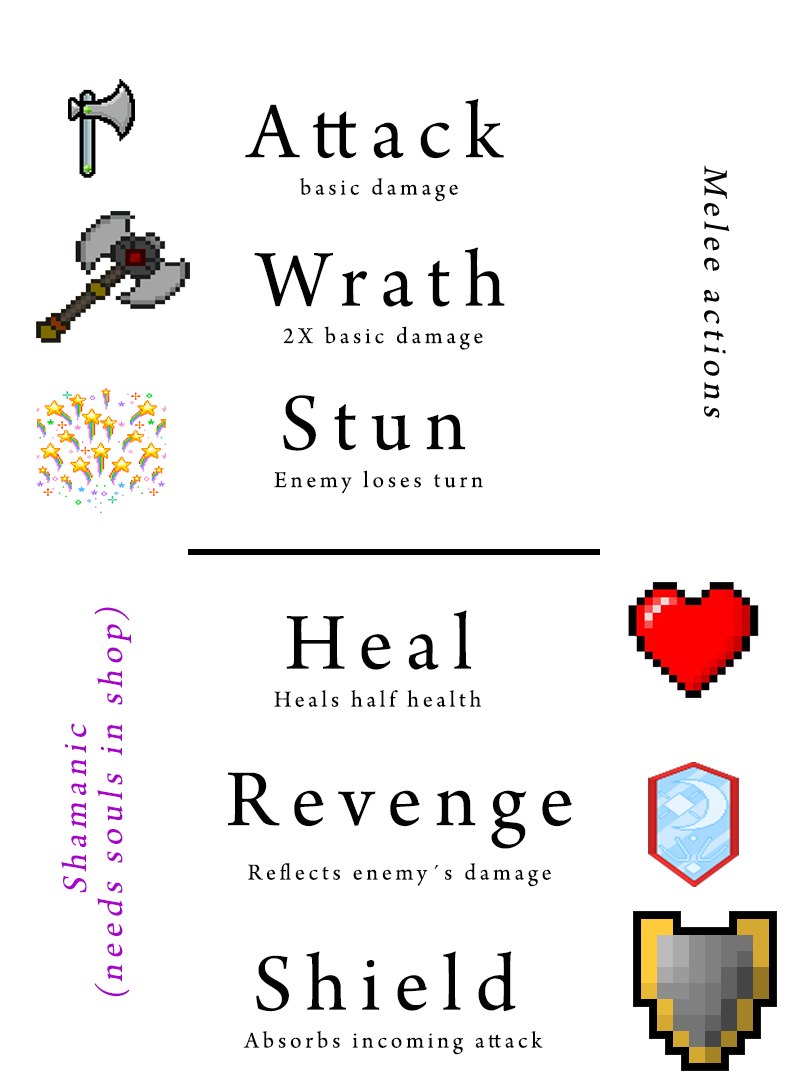
<style>
.page{position:relative;width:800px;height:1080px;background:#ffffff}
.page>*{position:absolute;margin:0}
.t1{font:85px "ArnoPro-Subhead";letter-spacing:0.165em;color:#030303}
.t2{font:24px "ArnoPro-Subhead";letter-spacing:0.165em;color:#030303}
.t3{font:36px/36px "ArnoPro-Subhead";letter-spacing:0.165em;color:#a606c8;font-style:italic}
</style>
<div class="page">
<p class="t1" style="left:245px;top:98px;width:259px;height:61px">Attack</p>
<p class="t2" style="left:299px;top:178px;width:159px;height:24px">basic damage</p>
<p class="t1" style="left:254px;top:247px;width:251px;height:60px">Wrath</p>
<p class="t2" style="left:283px;top:326px;width:200px;height:24px">2X basic damage</p>
<p class="t1" style="left:283px;top:395px;width:183px;height:56px">Stun</p>
<p class="t2" style="left:274px;top:470px;width:209px;height:24px">Enemy loses turn</p>
<p class="t3" style="left:61px;top:607px;width:71px;height:390px;text-align:center;rotate:-90deg">Shamanic <br>(needs souls in shop)</p>
<p class="t1" style="left:286px;top:610px;width:186px;height:60px">Heal</p>
<p class="t2" style="left:274px;top:690px;width:207px;height:17px">Heals half health</p>
<p class="t1" style="left:227px;top:772px;width:345px;height:77px">Revenge</p>
<p class="t2" style="left:248px;top:863px;width:303px;height:24px">Reflects enemy´s damage</p>
<p class="t1" style="left:256px;top:951px;width:260px;height:61px">Shield</p>
<p class="t2" style="left:243px;top:1031px;width:300px;height:24px">Absorbs incoming attack</p>
</div>
